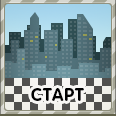
<style>
.page{position:relative;width:116px;height:116px}
.page>*{position:absolute;margin:0}
.t1{font:18px "RotondaC-Bold";letter-spacing:0.04em;color:#000000;text-transform:uppercase}
</style>
<div class="page">
<p class="t1" style="left:31px;top:88px;width:53px;height:13px">старт</p>
</div>
